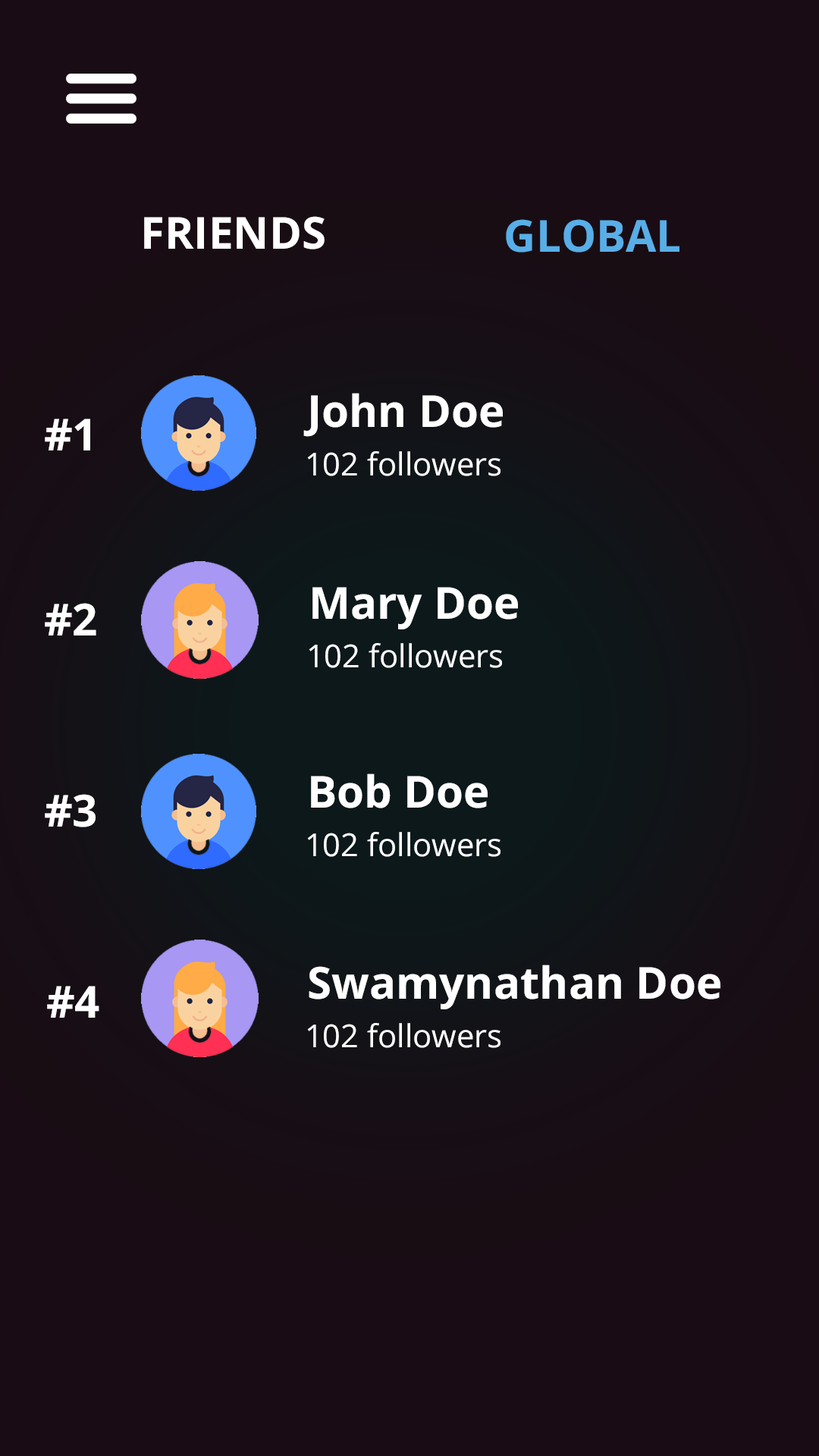
<style>
.page{position:relative;width:819px;height:1456px;background:#1a0c14}
.page>*{position:absolute;margin:0}
.t1{font:44.2px "OpenSans-Bold";color:#ffffff}
.t2{font:44.2px "OpenSans-Bold";color:#58aee7}
.t3{font:31.6px "OpenSans";color:#ffffff}
</style>
<div class="page">
<p class="t1" style="left:144px;top:216px;width:181px;height:33px">FRIENDS</p>
<p class="t2" style="left:506px;top:219px;width:173px;height:34px">GLOBAL</p>
<p class="t1" style="left:303px;top:393px;width:200px;height:44px">John Doe</p>
<p class="t1" style="left:45px;top:419px;width:45px;height:31px">#1</p>
<p class="t3" style="left:307px;top:451px;width:193px;height:25px">102 followers</p>
<p class="t1" style="left:312px;top:587px;width:206px;height:42px">Mary Doe</p>
<p class="t1" style="left:45px;top:603px;width:51px;height:32px">#2</p>
<p class="t3" style="left:309px;top:643px;width:193px;height:25px">102 followers</p>
<p class="t1" style="left:311px;top:773px;width:177px;height:35px">Bob Doe</p>
<p class="t1" style="left:45px;top:794px;width:51px;height:33px">#3</p>
<p class="t3" style="left:307px;top:832px;width:193px;height:25px">102 followers</p>
<p class="t1" style="left:309px;top:965px;width:411px;height:44px">Swamynathan Doe</p>
<p class="t1" style="left:47px;top:986px;width:52px;height:32px">#4</p>
<p class="t3" style="left:307px;top:1023px;width:193px;height:25px">102 followers</p>
</div>
